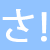
<style>
.page{position:relative;width:50px;height:50px;background:#91c3ff}
.page>*{position:absolute;margin:0}
.t1{font:37px "KozGoPr6N-Regular";color:#ffffff;font-weight:bold}
</style>
<div class="page">
<p class="t1" style="left:2px;top:9px;width:45px;height:33px">さ！</p>
</div>
